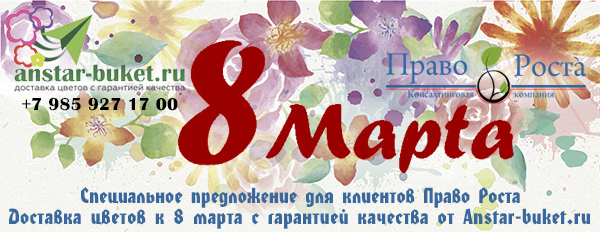
<style>
.page{position:relative;width:600px;height:232px}
.page>*{position:absolute;margin:0}
.t1{font:18px "BritannicBold";letter-spacing:0.017em;color:#000000}
.t2{font:20px "HondaC";color:#39689c}
.t3{font:20px "HondaC";letter-spacing:0.017em;color:#39689c}
</style>
<div class="page">
<p class="t1" style="left:22px;top:97px;width:156px;height:14px">+7 985 927 17 00</p>
<p class="t2" style="left:81px;top:187px;width:439px;height:21px">Специальное предложение для клиентов Право Роста</p>
<p class="t3" style="left:9px;top:208px;width:581px;height:21px">Доставка цветов к 8 марта с гарантией качества от Anstar-buket.ru</p>
</div>
